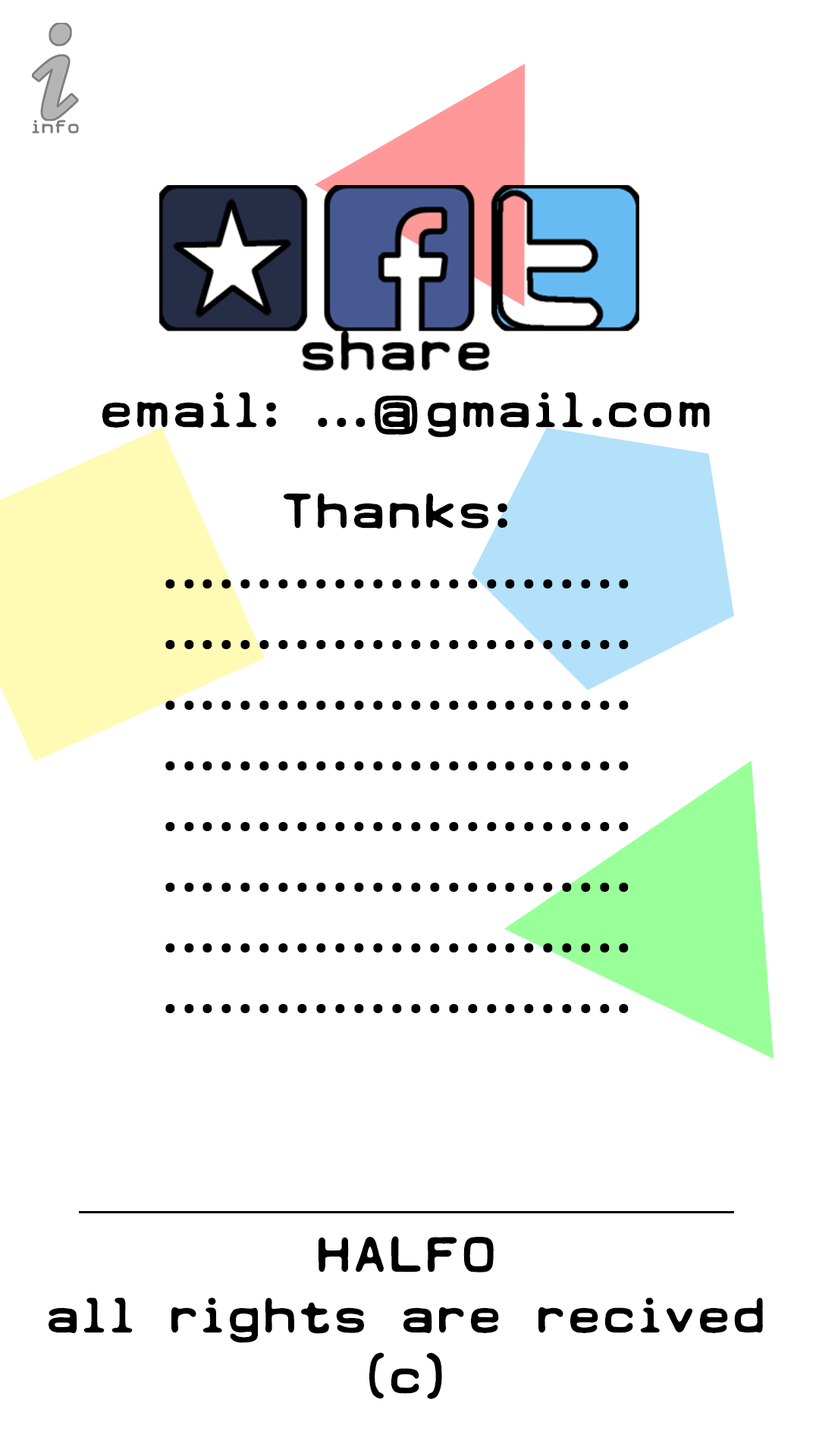
<style>
.page{position:relative;width:819px;height:1456px;background:#ffffff}
.page>*{position:absolute;margin:0}
.t1{font:50.6px "Earth2073";color:#000000}
</style>
<div class="page">
<p class="t1" style="left:102px;top:392px;width:608px;height:46px">email: ...@gmail.com</p>
<p class="t1" style="left:165px;top:493px;width:464px;height:520px;text-align:center">Thanks: ..........................................................................................................................................................................................................</p>
<p class="t1" style="left:49px;top:1236px;width:714px;height:163px;text-align:center">HALFO<br>all rights are recived (c)</p>
</div>
